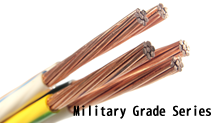
<style>
.page{position:relative;width:215px;height:123px;background:#ffffff}
.page>*{position:absolute;margin:0}
.t1{font:12.5px "AdobeFanHeitiStd-Bold";color:#000000;font-weight:bold}
</style>
<div class="page">
<p class="t1" style="left:73px;top:105px;width:138px;height:14px">Military Grade Series</p>
</div>
